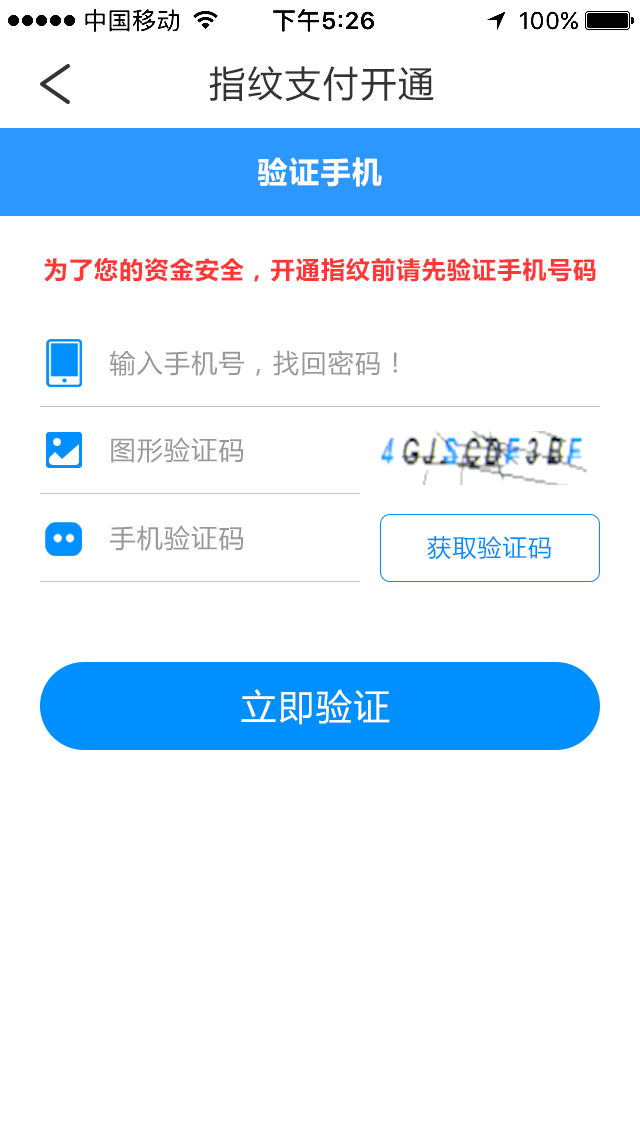
<style>
.page{position:relative;width:640px;height:1136px;background:#ffffff}
.page>*{position:absolute;margin:0}
.t1{font:36px "MicrosoftYaHei";letter-spacing:0.05em;color:#333333}
.t2{font:30px "MicrosoftYaHei-Bold";letter-spacing:0.05em;color:#ffffff}
.t3{font:24px "MicrosoftYaHei-Bold";letter-spacing:0.05em;color:#ff3737}
.t4{font:26px "MicrosoftYaHei";letter-spacing:0.05em;color:#999999}
.t5{font:24px "MicrosoftYaHei";letter-spacing:0.05em;color:#008fff}
.t6{font:36px "MicrosoftYaHei";letter-spacing:0.05em;color:#ffffff}
</style>
<div class="page">
<p class="t1" style="left:209px;top:66px;width:225px;height:36px">指纹支付开通</p>
<p class="t2" style="left:257px;top:157px;width:125px;height:30px">验证手机</p>
<p class="t3" style="left:44px;top:258px;width:552px;height:24px">为了您的资金安全，开通指纹前请先验证手机号码</p>
<p class="t4" style="left:110px;top:350px;width:287px;height:26px">输入手机号，找回密码！</p>
<p class="t4" style="left:111px;top:437px;width:133px;height:26px">图形验证码</p>
<p class="t4" style="left:110px;top:525px;width:134px;height:26px">手机验证码</p>
<p class="t5" style="left:427px;top:536px;width:124px;height:24px">获取验证码</p>
<p class="t6" style="left:241px;top:689px;width:149px;height:36px">立即验证</p>
</div>
